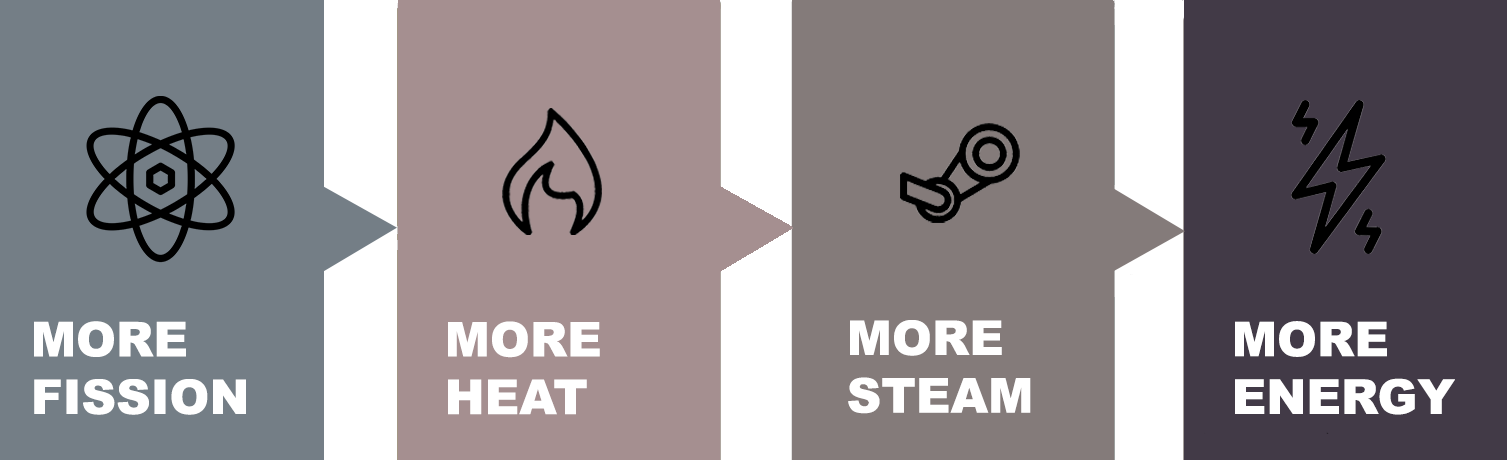
<style>
.page{position:relative;width:1507px;height:460px;background:#a58f90}
.page>*{position:absolute;margin:0}
.t1{font:48px "Arial-Black";color:#ffffff}
</style>
<div class="page">
<p class="t1" style="left:34px;top:321px;width:212px;height:94px">MORE <br>FISSION</p>
<p class="t1" style="left:448px;top:321px;width:152px;height:94px">MORE<br>HEAT</p>
<p class="t1" style="left:848px;top:320px;width:183px;height:94px">MORE<br>STEAM</p>
<p class="t1" style="left:1235px;top:321px;width:220px;height:94px">MORE<br>ENERGY</p>
</div>
